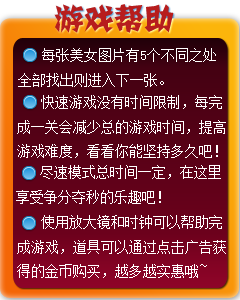
<style>
.page{position:relative;width:240px;height:300px}
.page>*{position:absolute;margin:0}
.t1{font:30px "JJianzi";color:#b71d1d}
.t2{font:14px "SimSun";color:#ffffff}
.t3{font:12px "SimSun";color:#ffffff}
</style>
<div class="page">
<p class="t1" style="left:54px;top:4px;width:120px;height:29px">游戏帮助</p>
<p class="t2" style="left:18px;top:48px;width:198px;height:39px"><span class="t3">    </span>每张美女图片有5个不同之处<br>全部找出则进入下一张。</p>
<p class="t2" style="left:17px;top:95px;width:209px;height:63px"><span class="t3">    </span>快速游戏没有时间限制，每完<br>成一关会减少总的游戏时间，提高<br>游戏难度，看看你能坚持多久吧！</p>
<p class="t2" style="left:16px;top:165px;width:205px;height:39px"><span class="t3">    </span>尽速模式总时间一定，在这里<br>享受争分夺秒的乐趣吧！</p>
<p class="t2" style="left:17px;top:215px;width:209px;height:63px"><span class="t3">    </span>使用放大镜和时钟可以帮助完<br>成游戏，道具可以通过点击广告获<br>得的金币购买，越多越实惠哦~</p>
</div>
